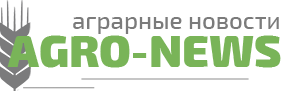
<style>
.page{position:relative;width:282px;height:91px;background:#ffffff}
.page>*{position:absolute;margin:0}
.t1{font:24px "Exo2-Medium";color:#7b7b7b}
.t2{font:45.3px "Exo2-Black";color:#79b458}
</style>
<div class="page">
<p class="t1" style="left:73px;top:17px;width:206px;height:17px">аграрные новости</p>
<p class="t2" style="left:7px;top:35px;width:274px;height:33px">AGRO-NEWS</p>
</div>
